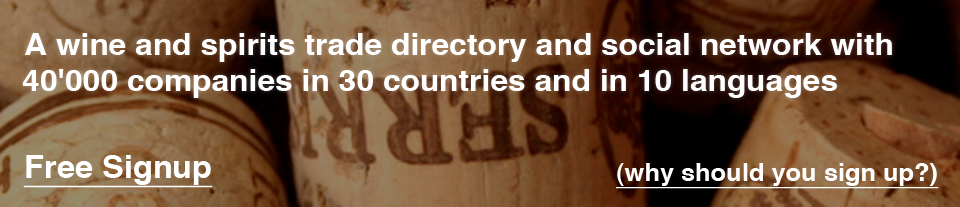
<style>
.page{position:relative;width:960px;height:207px}
.page>*{position:absolute;margin:0}
.t1{font:30px "Helvetica-Bold";color:#ffffff;scale:1.06 1}
.t2{font:30.8px "Helvetica-Bold";color:#ffffff;text-decoration:underline;scale:1.06 1}
.t3{font:24px "Helvetica-Bold";color:#ffffff;text-decoration:underline;scale:1.06 1}
</style>
<div class="page">
<p class="t1" style="left:22px;top:33px;width:870px;height:65px">A wine and spirits trade directory and social network with<br>40'000 companies in 30 countries and in 10 languages</p>
<p class="t2" style="left:23px;top:155px;width:190px;height:33px">Free Signup</p>
<p class="t3" style="left:616px;top:163px;width:323px;height:26px">(why should you sign up?)</p>
</div>
